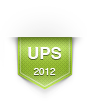
<style>
.page{position:relative;width:87px;height:108px;background:#ffffff}
.page>*{position:absolute;margin:0}
.t1{font:9.7px "Helvetica";color:#fefefe}
.t2{font:17px "Helvetica-Bold";color:#fefefe}
</style>
<div class="page">
<p class="t1" style="left:28px;top:47px;width:34px;height:28px;text-align:center"><span class="t2">UPS<br><br></span>2012</p>
</div>
